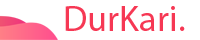
<style>
.page{position:relative;width:200px;height:40px;background:#ffffff}
.page>*{position:absolute;margin:0}
.t1{font:36px "MyriadPro-Regular";letter-spacing:0.005em;color:#f63854}
</style>
<div class="page">
<p class="t1" style="left:65px;top:6px;width:120px;height:25px">DurKari.</p>
</div>
